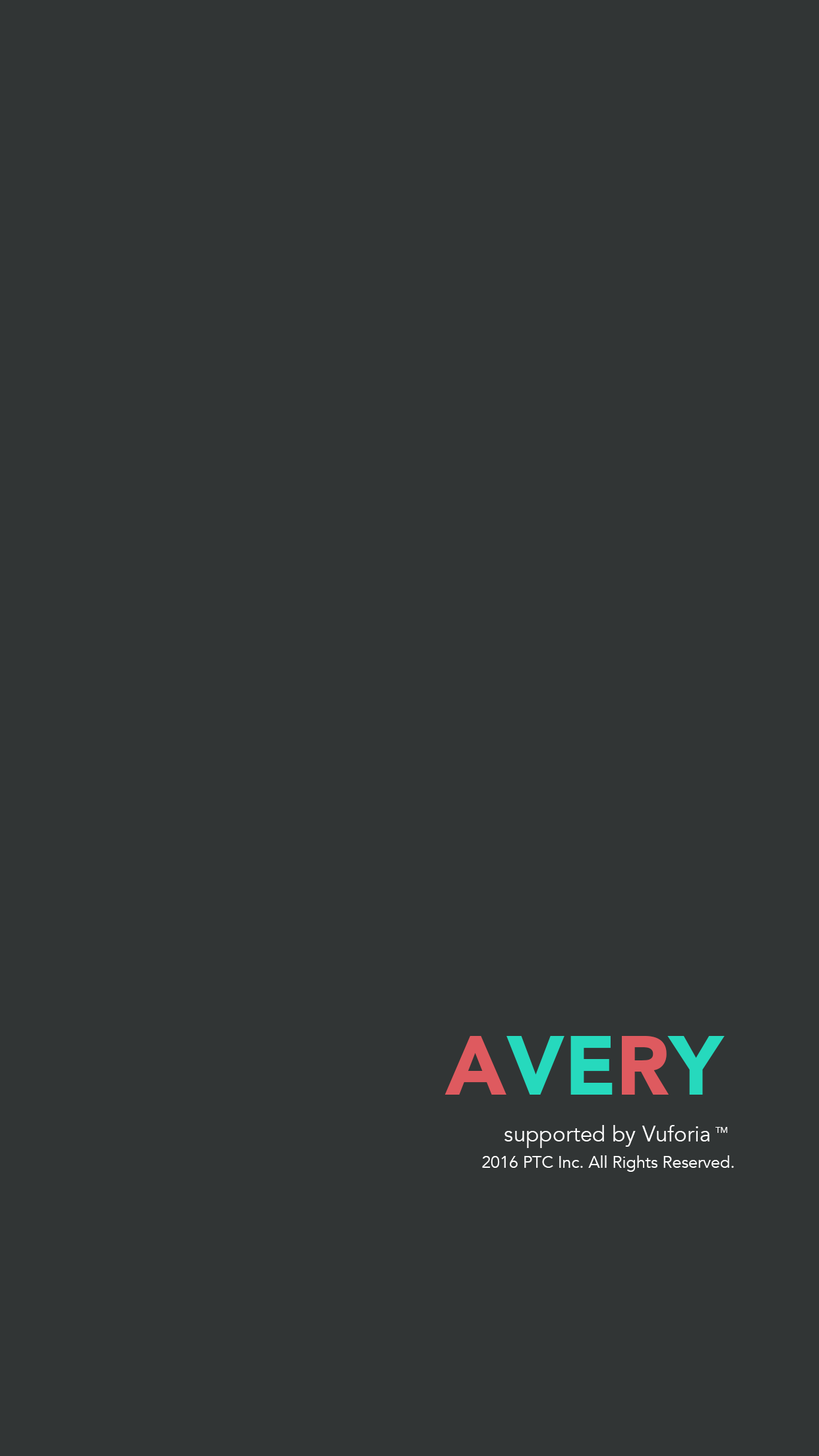
<style>
.page{position:relative;width:819px;height:1456px;background:#313535}
.page>*{position:absolute;margin:0}
.t1{font:82.4px "Avenir-Black";color:#26d9bd}
.t2{font:82.4px "Avenir-Black";color:#de5a5f}
.t3{font:22px "Avenir-Book";color:#ffffff}
.t4{font:8.2px "Avenir-Book";color:#ffffff}
.t5{font:16.5px "Avenir-Book";color:#ffffff}
</style>
<div class="page">
<p class="t1" style="left:444px;top:1036px;width:281px;height:59px"><span class="t2">A</span>VE<span class="t2">R</span>Y</p>
<p class="t3" style="left:504px;top:1125px;width:206px;height:23px">supported by Vuforia</p>
<p class="t4" style="left:715px;top:1127px;width:12px;height:6px">TM</p>
<p class="t5" style="left:482px;top:1155px;width:252px;height:17px">2016 PTC Inc. All Rights Reserved.</p>
</div>
